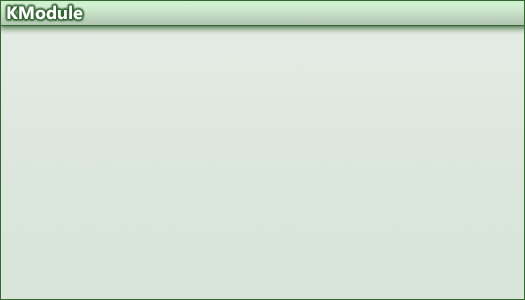
<style>
.page{position:relative;width:525px;height:300px}
.page>*{position:absolute;margin:0}
.t1{font:18px "SegoeUI-Bold";color:#ffffff}
</style>
<div class="page">
<p class="t1" style="left:7px;top:5px;width:76px;height:15px">KModule</p>
</div>
